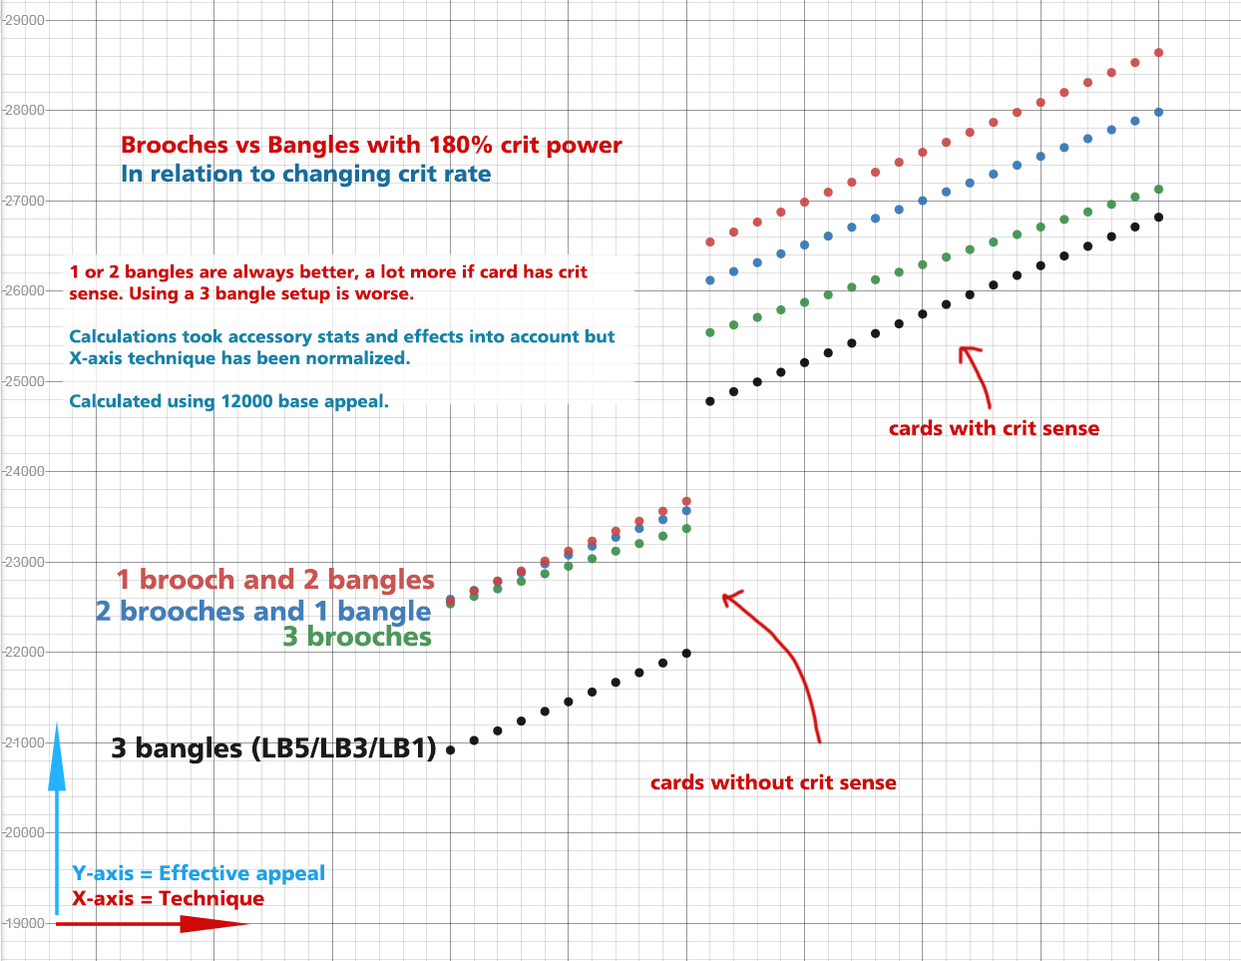
<style>
.page{position:relative;width:1241px;height:961px;background:#ffffff}
.page>*{position:absolute;margin:0}
.t1{font:23.9px "DorisPFC-Bold";color:#d00909}
.t2{font:23.9px "DorisPFC-Bold";color:#156e9c}
.t3{font:18px "DorisPFC-Bold";color:#1284a9}
.t4{font:18px "DorisPFC-Bold";color:#d00909}
.t5{font:21px "DorisPFC-Bold";color:#d00909}
.t6{font:27.9px "DorisPFC-Bold";color:#ca5451}
.t7{font:27.9px "DorisPFC-Bold";color:#407eb9}
.t8{font:27.9px "DorisPFC-Bold";color:#4c9859}
.t9{font:27.9px "DorisPFC-Bold";color:#1a1a1a}
.t10{font:21px "DorisPFC-Bold";color:#18a3ed}
</style>
<div class="page">
<p class="t1" style="left:122px;top:135px;width:501px;height:53px">Brooches vs Bangles with 180% crit power<br><span class="t2">In relation to changing crit rate</span></p>
<p class="t3" style="left:69px;top:263px;width:547px;height:149px"><span class="t4">1 or 2 bangles are always better, a lot more if card has crit sense. Using a 3 bangle setup is worse.<br><br></span>Calculations took accessory stats and effects into account but X-axis technique has been normalized.<br><br>Calculated using 12000 base appeal.</p>
<p class="t5" style="left:889px;top:419px;width:210px;height:17px">cards with crit sense</p>
<p class="t6" style="left:117px;top:568px;width:318px;height:28px">1 brooch and 2 bangles</p>
<p class="t7" style="left:96px;top:599px;width:335px;height:28px">2 brooches and 1 bangle</p>
<p class="t8" style="left:283px;top:625px;width:149px;height:22px">3 brooches</p>
<p class="t9" style="left:112px;top:735px;width:324px;height:29px">3 bangles (LB5/LB3/LB1)</p>
<p class="t5" style="left:650px;top:773px;width:247px;height:17px">cards without crit sense</p>
<p class="t10" style="left:72px;top:864px;width:252px;height:46px">Y-axis = Effective appeal<br><span class="t5">X-axis = Technique</span></p>
</div>
